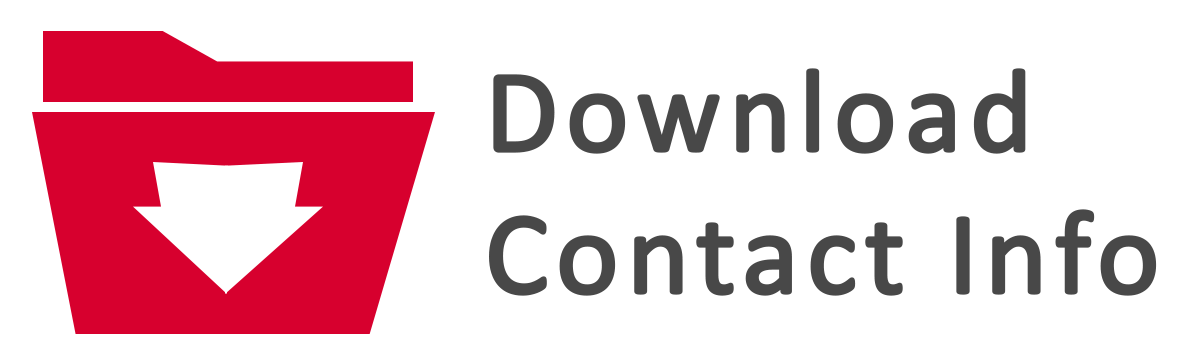
<style>
.page{position:relative;width:1200px;height:350px;background:#ffffff}
.page>*{position:absolute;margin:0}
.t1{font:118.6px "Calibri";letter-spacing:0.04em;color:#484848;font-weight:bold}
</style>
<div class="page">
<p class="t1" style="left:489px;top:68px;width:668px;height:228px">Download<br>Contact Info</p>
</div>
